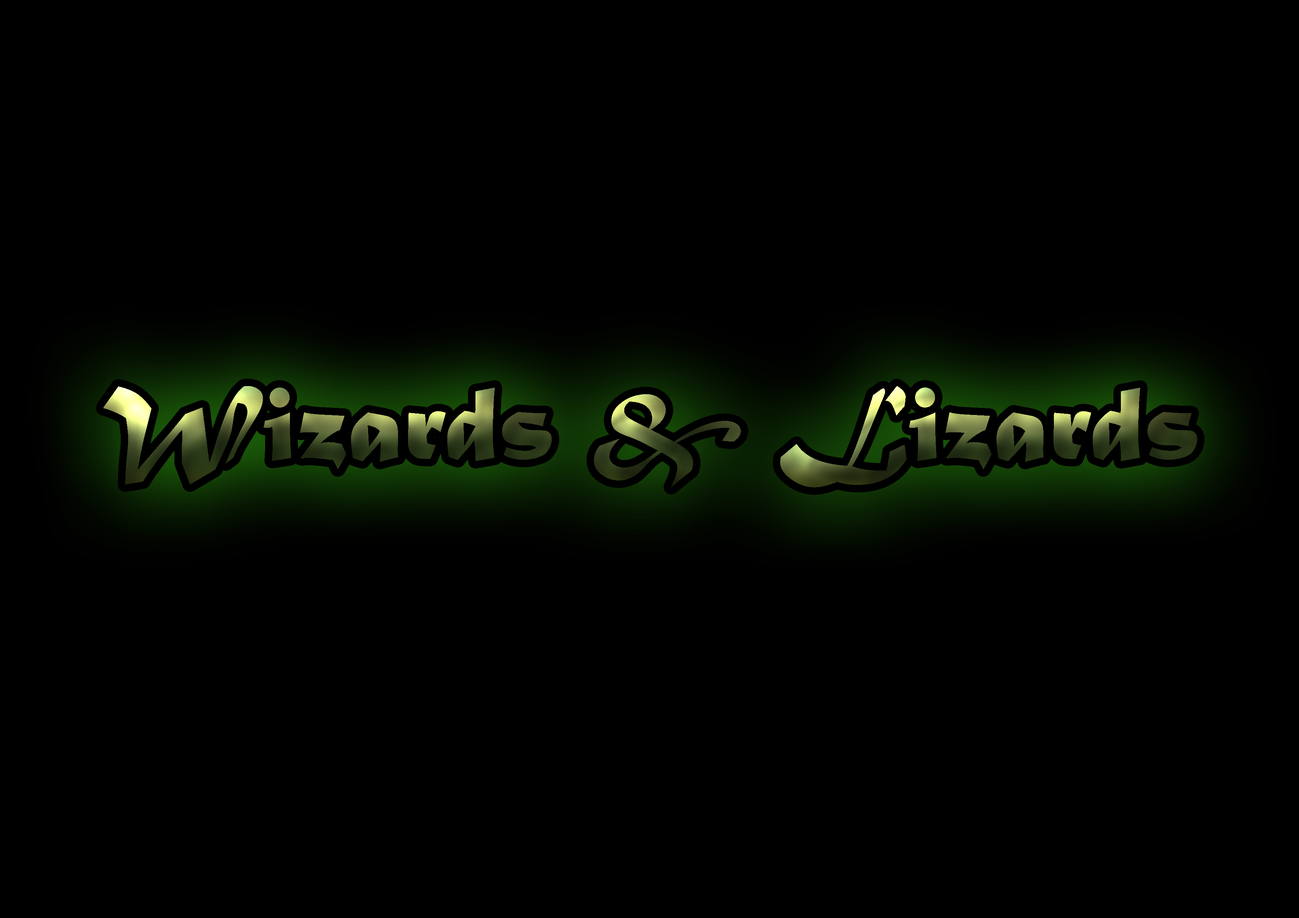
<style>
.page{position:relative;width:1299px;height:918px;background:#000000}
.page>*{position:absolute;margin:0}
.t1{font:111.1px "MaturaMTScriptCapitals"}
</style>
<div class="page">
<p class="t1" style="left:103px;top:386px;width:1094px;height:102px">Wizards &amp; Lizards</p>
</div>
